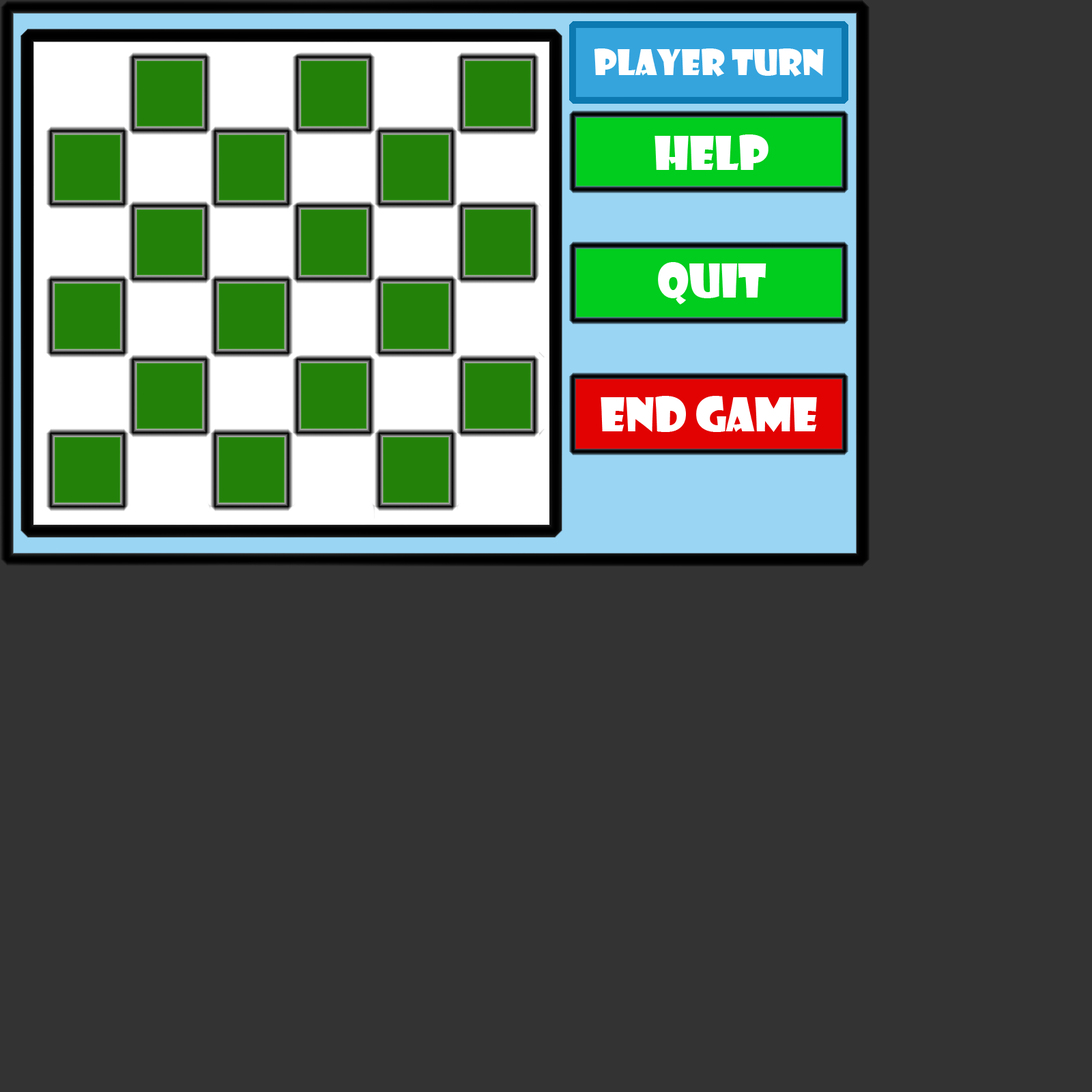
<style>
.page{position:relative;width:1092px;height:1092px;background:#333333}
.page>*{position:absolute;margin:0}
.t1{font:34.9px "ShowcardGothic-Reg";color:#ffffff}
.t2{font:45.5px "ShowcardGothic-Reg";color:#ffffff}
</style>
<div class="page">
<p class="t1" style="left:594px;top:48px;width:230px;height:28px">Player Turn</p>
<p class="t2" style="left:655px;top:134px;width:113px;height:36px">Help</p>
<p class="t2" style="left:658px;top:262px;width:108px;height:42px">Quit</p>
<p class="t2" style="left:601px;top:396px;width:216px;height:36px">End Game</p>
</div>
